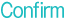
<style>
.page{position:relative;width:82px;height:21px;background:#ffffff}
.page>*{position:absolute;margin:0}
.t1{font:20px "GothicMB101Pro-Regular";letter-spacing:-0.06em;color:#1dbcc0;scale:0.9 1}
</style>
<div class="page">
<p class="t1" style="left:1px;top:1px;width:63px;height:17px">Confirm</p>
</div>
